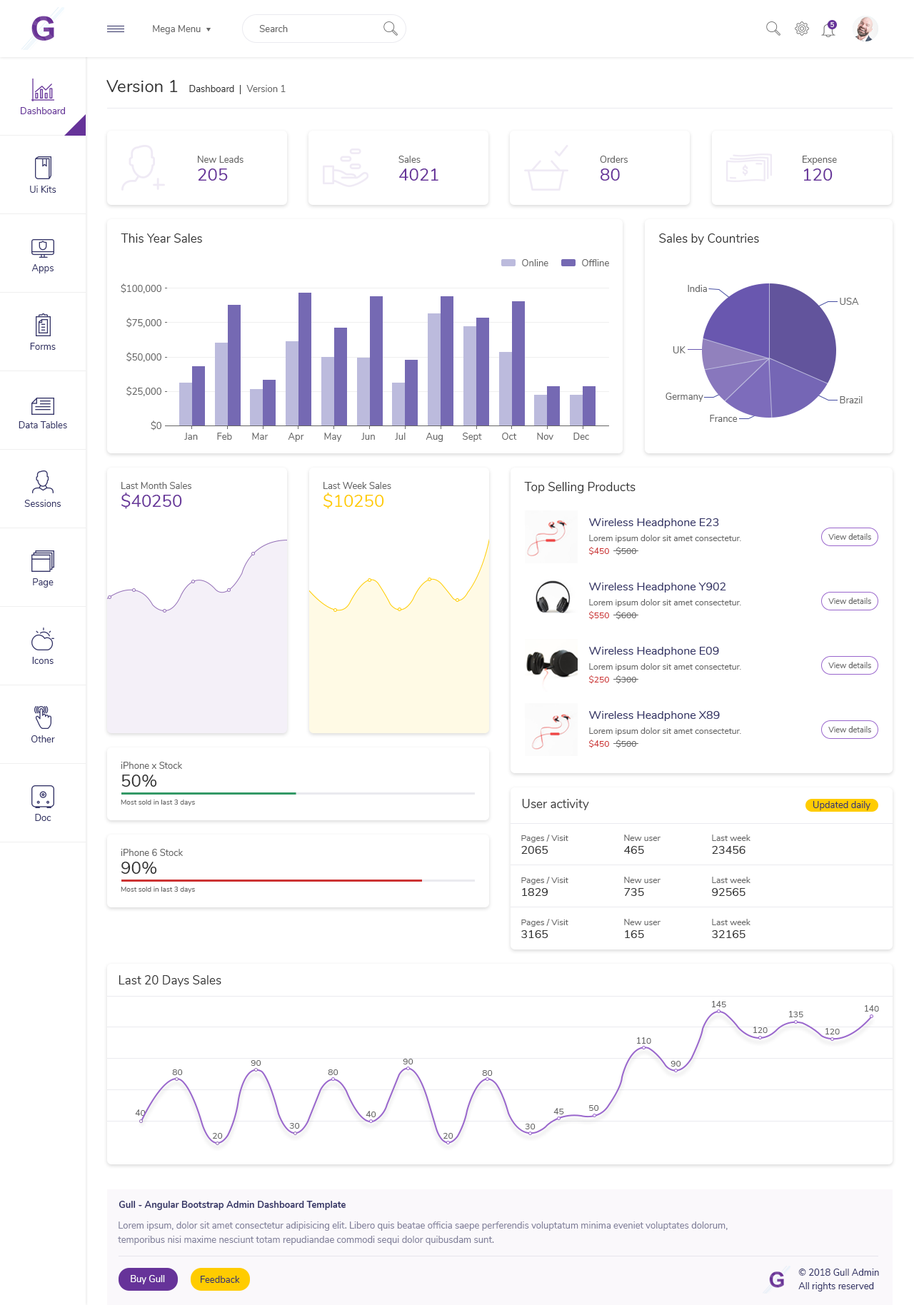
<style>
.page{position:relative;width:914px;height:1305px;background:#ffffff}
.page>*{position:absolute;margin:0}
.t1{font:9.3px "Nunito-Regular";color:#666666}
.t2{font:6.4px "Nunito-SemiBold";color:#ffffff}
.t3{font:17.1px "Nunito-Regular";color:#333333}
.t4{font:9.3px "Nunito-Regular";color:#333333}
.t5{font:9.3px "Nunito-Regular";color:#663399}
.t6{font:17.1px "Nunito-Regular";color:#663399}
.t7{font:9.3px "Nunito-Regular";color:#333366}
.t8{font:12.1px "Nunito-Regular";color:#333333}
.t9{font:17.1px "Nunito-Regular";color:#ffcc00}
.t10{font:11.4px "Nunito-Regular";color:#333366}
.t11{font:7.9px "Nunito-Regular";color:#666666}
.t12{font:8.6px "Nunito-Regular";color:#666666}
.t13{font:8.6px "Nunito-Regular";color:#cc3333}
.t14{font:7.1px "Nunito-Regular";color:#666666}
.t15{font:11.4px "Nunito-Regular";color:#333333}
.t16{font:9.3px "Nunito-Bold";color:#333366}
.t17{font:9.3px/14.3px "Nunito-Regular";color:#82819b}
.t18{font:9.3px "Nunito-Regular";color:#ffffff}
</style>
<div class="page">
<p class="t1" style="left:153px;top:25px;width:48px;height:9px">Mega Menu</p>
<p class="t1" style="left:259px;top:25px;width:29px;height:7px">Search</p>
<p class="t2" style="left:830px;top:22px;width:4px;height:5px">5</p>
<p class="t3" style="left:106px;top:80px;width:72px;height:12px">Version 1</p>
<p class="t4" style="left:189px;top:85px;width:45px;height:7px">Dashboard</p>
<p class="t1" style="left:246px;top:85px;width:40px;height:7px">Version 1</p>
<p class="t5" style="left:21px;top:107px;width:44px;height:7px">Dashboard</p>
<p class="t1" style="left:198px;top:156px;width:45px;height:7px">New Leads</p>
<p class="t1" style="left:398px;top:156px;width:22px;height:7px">Sales</p>
<p class="t1" style="left:600px;top:156px;width:27px;height:7px">Orders</p>
<p class="t1" style="left:802px;top:156px;width:35px;height:9px">Expense</p>
<p class="t6" style="left:198px;top:168px;width:30px;height:13px">205</p>
<p class="t6" style="left:399px;top:168px;width:39px;height:13px">4021</p>
<p class="t6" style="left:600px;top:168px;width:20px;height:13px">80</p>
<p class="t6" style="left:804px;top:168px;width:28px;height:13px">120</p>
<p class="t7" style="left:30px;top:186px;width:26px;height:7px">Ui Kits</p>
<p class="t8" style="left:121px;top:233px;width:81px;height:10px">This Year Sales</p>
<p class="t8" style="left:659px;top:233px;width:100px;height:12px">Sales by Countries</p>
<p class="t7" style="left:31px;top:264px;width:23px;height:9px">Apps</p>
<p class="t1" style="left:522px;top:259px;width:26px;height:7px">Online</p>
<p class="t1" style="left:582px;top:259px;width:27px;height:7px">Offline</p>
<p class="t1" style="left:121px;top:283px;width:40px;height:10px">$100,000</p>
<p class="t1" style="left:687px;top:285px;width:20px;height:7px">India</p>
<p class="t1" style="left:840px;top:298px;width:19px;height:7px">USA</p>
<p class="t1" style="left:126px;top:318px;width:35px;height:10px">$75,000</p>
<p class="t7" style="left:30px;top:343px;width:26px;height:7px">Forms</p>
<p class="t1" style="left:126px;top:352px;width:35px;height:10px">$50,000</p>
<p class="t1" style="left:672px;top:346px;width:13px;height:7px">UK</p>
<p class="t1" style="left:126px;top:386px;width:35px;height:10px">$25,000</p>
<p class="t1" style="left:665px;top:393px;width:38px;height:9px">Germany</p>
<p class="t1" style="left:840px;top:396px;width:22px;height:7px">Brazil</p>
<p class="t7" style="left:19px;top:421px;width:48px;height:7px">Data Tables</p>
<p class="t1" style="left:151px;top:420px;width:10px;height:10px">$0</p>
<p class="t1" style="left:710px;top:415px;width:27px;height:7px">France</p>
<p class="t1" style="left:184px;top:433px;width:14px;height:7px">Jan</p>
<p class="t1" style="left:217px;top:433px;width:15px;height:7px">Feb</p>
<p class="t1" style="left:252px;top:433px;width:16px;height:7px">Mar</p>
<p class="t1" style="left:288px;top:433px;width:16px;height:9px">Apr</p>
<p class="t1" style="left:324px;top:433px;width:18px;height:9px">May</p>
<p class="t1" style="left:361px;top:433px;width:14px;height:7px">Jun</p>
<p class="t1" style="left:395px;top:433px;width:10px;height:7px">Jul</p>
<p class="t1" style="left:425px;top:433px;width:18px;height:9px">Aug</p>
<p class="t1" style="left:463px;top:433px;width:19px;height:9px">Sept</p>
<p class="t1" style="left:502px;top:433px;width:15px;height:7px">Oct</p>
<p class="t1" style="left:537px;top:433px;width:16px;height:7px">Nov</p>
<p class="t1" style="left:573px;top:433px;width:16px;height:7px">Dec</p>
<p class="t1" style="left:121px;top:482px;width:70px;height:7px">Last Month Sales</p>
<p class="t1" style="left:323px;top:482px;width:68px;height:7px">Last Week Sales</p>
<p class="t8" style="left:524px;top:482px;width:111px;height:11px">Top Selling Products</p>
<p class="t6" style="left:121px;top:493px;width:61px;height:16px">$40250</p>
<p class="t9" style="left:323px;top:493px;width:61px;height:16px">$10250</p>
<p class="t7" style="left:24px;top:500px;width:37px;height:7px">Sessions</p>
<p class="t10" style="left:589px;top:518px;width:130px;height:10px">Wireless Headphone E23</p>
<p class="t11" style="left:828px;top:533px;width:43px;height:7px">View details</p>
<p class="t12" style="left:589px;top:535px;width:152px;height:8px">Lorem ipsum dolor sit amet consectetur.</p>
<p class="t13" style="left:588px;top:547px;width:21px;height:8px">$450</p>
<p class="t12" style="left:615px;top:547px;width:21px;height:8px">$500</p>
<p class="t7" style="left:33px;top:578px;width:21px;height:10px">Page</p>
<p class="t10" style="left:589px;top:583px;width:137px;height:10px">Wireless Headphone Y902</p>
<p class="t12" style="left:589px;top:599px;width:152px;height:8px">Lorem ipsum dolor sit amet consectetur.</p>
<p class="t11" style="left:828px;top:598px;width:43px;height:6px">View details</p>
<p class="t13" style="left:588px;top:611px;width:21px;height:9px">$550</p>
<p class="t12" style="left:615px;top:611px;width:21px;height:9px">$600</p>
<p class="t10" style="left:589px;top:647px;width:130px;height:10px">Wireless Headphone E09</p>
<p class="t7" style="left:32px;top:657px;width:22px;height:7px">Icons</p>
<p class="t12" style="left:589px;top:663px;width:152px;height:8px">Lorem ipsum dolor sit amet consectetur.</p>
<p class="t11" style="left:828px;top:662px;width:43px;height:6px">View details</p>
<p class="t13" style="left:588px;top:675px;width:21px;height:9px">$250</p>
<p class="t12" style="left:615px;top:675px;width:21px;height:9px">$300</p>
<p class="t10" style="left:589px;top:711px;width:131px;height:10px">Wireless Headphone X89</p>
<p class="t7" style="left:31px;top:735px;width:24px;height:7px">Other</p>
<p class="t12" style="left:589px;top:727px;width:152px;height:8px">Lorem ipsum dolor sit amet consectetur.</p>
<p class="t11" style="left:828px;top:726px;width:43px;height:6px">View details</p>
<p class="t13" style="left:588px;top:740px;width:21px;height:8px">$450</p>
<p class="t12" style="left:615px;top:740px;width:21px;height:8px">$500</p>
<p class="t1" style="left:121px;top:762px;width:61px;height:7px">iPhone x Stock</p>
<p class="t3" style="left:121px;top:775px;width:36px;height:12px">50%</p>
<p class="t14" style="left:121px;top:800px;width:74px;height:6px">Most sold in last 3 days</p>
<p class="t8" style="left:522px;top:799px;width:67px;height:11px">User activity</p>
<p class="t7" style="left:812px;top:801px;width:58px;height:9px">Updated daily</p>
<p class="t7" style="left:35px;top:814px;width:16px;height:7px">Doc</p>
<p class="t12" style="left:521px;top:835px;width:47px;height:7px">Pages / Visit</p>
<p class="t15" style="left:521px;top:846px;width:27px;height:8px">2065</p>
<p class="t12" style="left:624px;top:835px;width:36px;height:6px">New user</p>
<p class="t15" style="left:624px;top:846px;width:20px;height:8px">465</p>
<p class="t12" style="left:712px;top:835px;width:38px;height:6px">Last week</p>
<p class="t15" style="left:712px;top:846px;width:33px;height:8px">23456</p>
<p class="t1" style="left:121px;top:849px;width:62px;height:7px">iPhone 6 Stock</p>
<p class="t3" style="left:121px;top:862px;width:36px;height:12px">90%</p>
<p class="t12" style="left:521px;top:877px;width:47px;height:7px">Pages / Visit</p>
<p class="t12" style="left:624px;top:877px;width:36px;height:6px">New user</p>
<p class="t12" style="left:712px;top:877px;width:38px;height:6px">Last week</p>
<p class="t14" style="left:121px;top:887px;width:74px;height:6px">Most sold in last 3 days</p>
<p class="t15" style="left:522px;top:888px;width:26px;height:8px">1829</p>
<p class="t15" style="left:624px;top:888px;width:20px;height:8px">735</p>
<p class="t15" style="left:712px;top:888px;width:33px;height:8px">92565</p>
<p class="t12" style="left:521px;top:919px;width:47px;height:8px">Pages / Visit</p>
<p class="t12" style="left:624px;top:919px;width:36px;height:6px">New user</p>
<p class="t12" style="left:712px;top:919px;width:38px;height:6px">Last week</p>
<p class="t15" style="left:521px;top:930px;width:27px;height:8px">3165</p>
<p class="t15" style="left:625px;top:930px;width:19px;height:8px">165</p>
<p class="t15" style="left:712px;top:930px;width:33px;height:8px">32165</p>
<p class="t8" style="left:119px;top:975px;width:102px;height:12px">Last 20 Days Sales</p>
<p class="t12" style="left:712px;top:1001px;width:14px;height:6px">145</p>
<p class="t12" style="left:789px;top:1011px;width:14px;height:6px">135</p>
<p class="t12" style="left:865px;top:1005px;width:14px;height:7px">140</p>
<p class="t12" style="left:637px;top:1037px;width:14px;height:7px">110</p>
<p class="t12" style="left:753px;top:1027px;width:14px;height:6px">120</p>
<p class="t12" style="left:825px;top:1028px;width:15px;height:6px">120</p>
<p class="t12" style="left:251px;top:1060px;width:10px;height:6px">90</p>
<p class="t12" style="left:403px;top:1059px;width:10px;height:5px">90</p>
<p class="t12" style="left:670px;top:1061px;width:11px;height:6px">90</p>
<p class="t12" style="left:172px;top:1069px;width:11px;height:6px">80</p>
<p class="t12" style="left:328px;top:1069px;width:10px;height:6px">80</p>
<p class="t12" style="left:482px;top:1070px;width:11px;height:6px">80</p>
<p class="t12" style="left:135px;top:1109px;width:11px;height:7px">40</p>
<p class="t12" style="left:553px;top:1108px;width:11px;height:6px">45</p>
<p class="t12" style="left:589px;top:1105px;width:10px;height:6px">50</p>
<p class="t12" style="left:366px;top:1111px;width:10px;height:6px">40</p>
<p class="t12" style="left:212px;top:1133px;width:11px;height:6px">20</p>
<p class="t12" style="left:289px;top:1123px;width:11px;height:6px">30</p>
<p class="t12" style="left:443px;top:1133px;width:10px;height:6px">20</p>
<p class="t12" style="left:525px;top:1124px;width:10px;height:5px">30</p>
<p class="t16" style="left:119px;top:1201px;width:227px;height:9px">Gull - Angular Bootstrap Admin Dashboard Template</p>
<p class="t17" style="left:118px;top:1221px;width:609px;height:24px">Lorem ipsum, dolor sit amet consectetur adipisicing elit. Libero quis beatae officia saepe perferendis voluptatum minima eveniet voluptates dolorum, <br>temporibus nisi maxime nesciunt totam repudiandae commodi sequi dolor quibusdam sunt.</p>
<p class="t18" style="left:131px;top:1275px;width:34px;height:9px">Buy Gull</p>
<p class="t7" style="left:201px;top:1276px;width:39px;height:7px">Feedback</p>
<p class="t7" style="left:798px;top:1269px;width:81px;height:7px">© 2018 Gull Admin</p>
<p class="t7" style="left:798px;top:1282px;width:76px;height:9px">All rights reserved</p>
</div>
